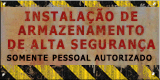
<style>
.page{position:relative;width:160px;height:80px}
.page>*{position:absolute;margin:0}
.t1{font:13px/13.7px "Tahoma-Bold";letter-spacing:0.1em;color:#941210;scale:0.92 1}
.t2{font:7.7px "Tahoma";letter-spacing:0.12em;color:#000000;font-weight:bold}
</style>
<div class="page">
<p class="t1" style="left:8px;top:8px;width:148px;height:44px;text-align:center">INSTALAÇÃO DE<br>ARMAZENAMENTO<br>DE ALTA SEGURANÇA</p>
<p class="t2" style="left:7px;top:54px;width:145px;height:7px">SOMENTE PESSOAL AUTORIZADO</p>
</div>
